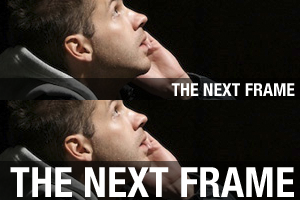
<style>
.page{position:relative;width:300px;height:200px}
.page>*{position:absolute;margin:0}
.t1{font:18px "HelveticaNeue-CondensedBold";color:#ffffff;text-transform:uppercase}
.t2{font:41.5px "HelveticaNeue-CondensedBold";color:#ffffff;text-transform:uppercase}
</style>
<div class="page">
<p class="t1" style="left:171px;top:83px;width:124px;height:13px">The next frame</p>
<p class="t2" style="left:10px;top:167px;width:284px;height:30px">the next frame</p>
</div>
